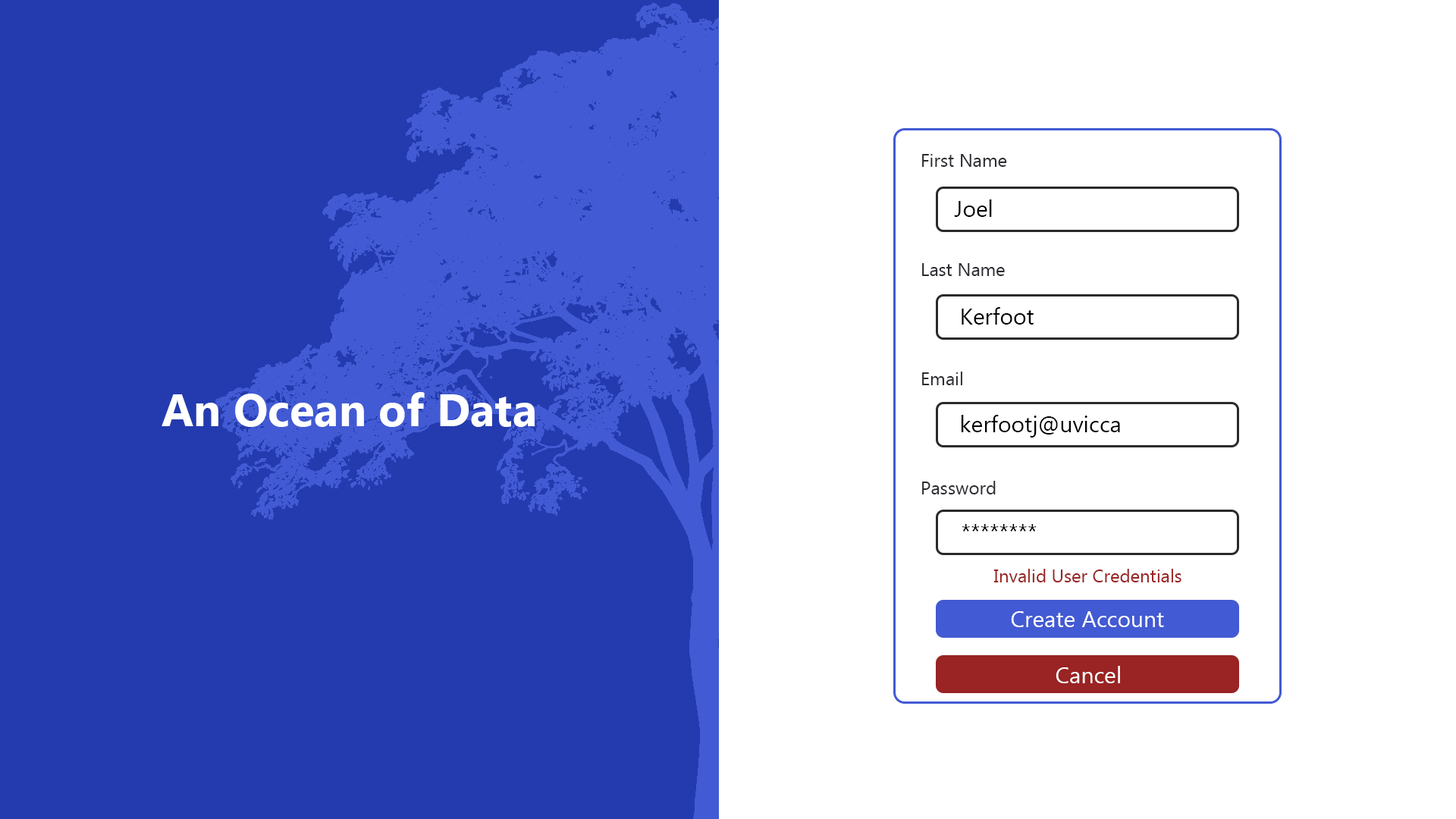
<style>
.page{position:relative;width:1456px;height:819px;background:#ffffff}
.page>*{position:absolute;margin:0}
.t1{font:18.2px "MyanmarText";color:#2c2d33}
.t2{font:22.7px "MyanmarText";color:#2c2d33}
.t3{font:22.7px "MyanmarText";color:#000000}
.t4{font:4.5px "MyanmarText";color:#000000}
.t5{font:45.5px "MyanmarText-Bold";color:#ffffff}
.t6{font:18.2px "MyanmarText";color:#9a2323}
.t7{font:22.7px "MyanmarText";color:#ffffff}
</style>
<div class="page">
<p class="t1" style="left:922px;top:154px;width:85px;height:340px"><span class="t2"> <br></span> First Name<br><br><br> <br><br> Last Name<br><br><br><br><br> Email<br><br><br><br><br> Password</p>
<p class="t3" style="left:954px;top:199px;width:38px;height:18px"><span class="t4"><br></span>   Joel</p>
<p class="t3" style="left:962px;top:307px;width:72px;height:18px"><span class="t4"><br></span>   Kerfoot</p>
<p class="t5" style="left:162px;top:392px;width:373px;height:35px">An Ocean of Data</p>
<p class="t3" style="left:961px;top:415px;width:159px;height:23px"><span class="t4"><br></span>   kerfootj@uvicca</p>
<p class="t3" style="left:962px;top:524px;width:75px;height:8px"><span class="t4"><br></span>   ********</p>
<p class="t6" style="left:993px;top:569px;width:188px;height:13px">Invalid User Credentials</p>
<p class="t7" style="left:1011px;top:611px;width:153px;height:16px">Create Account</p>
<p class="t7" style="left:1056px;top:666px;width:64px;height:17px">Cancel</p>
</div>
